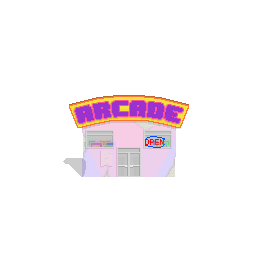
<style>
.page{position:relative;width:256px;height:256px;background:#ffffff}
.page>*{position:absolute;margin:0}
.t1{font:16.7px "8BITWONDERNominal";color:#9932ce}
</style>
<div class="page">
<p class="t1" style="left:75px;top:101px;width:108px;height:22px">ARCADE</p>
</div>
